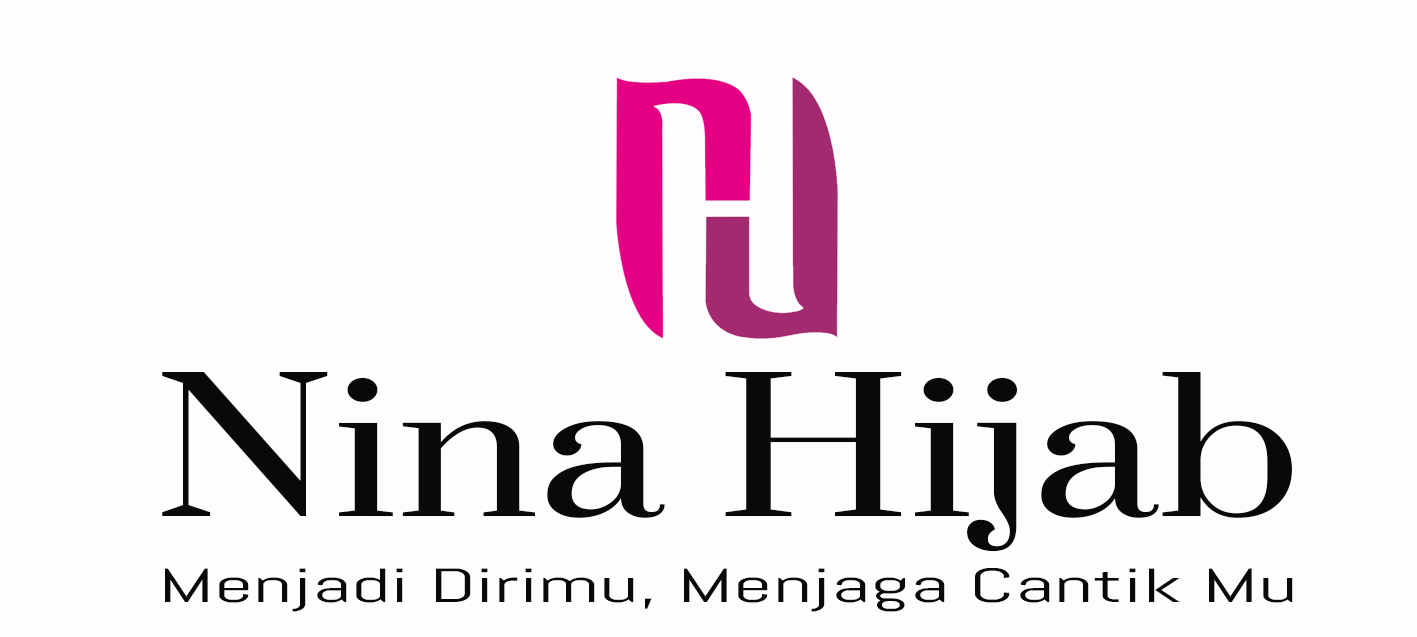
<style>
.page{position:relative;width:1417px;height:637px;background:#fefcfe}
.page>*{position:absolute;margin:0}
.t1{font:180.4px "Prata-Regular";color:#090909;scale:1.24 1}
.t2{font:48px "Abel-Regular";color:#090909;scale:1.81 1}
</style>
<div class="page">
<p class="t1" style="left:162px;top:372px;width:1130px;height:180px">Nina Hijab</p>
<p class="t2" style="left:165px;top:568px;width:1128px;height:44px">Menjadi Dirimu, Menjaga Cantik Mu</p>
</div>
